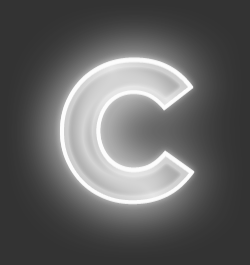
<style>
.page{position:relative;width:250px;height:265px;background:#333333}
.page>*{position:absolute;margin:0}
.t1{font:200px "GothamBlack";letter-spacing:0.05em}
</style>
<div class="page">
<p class="t1" style="left:60px;top:57px;width:135px;height:147px">C</p>
<p class="t1" style="left:60px;top:58px;width:135px;height:147px">C</p>
</div>
